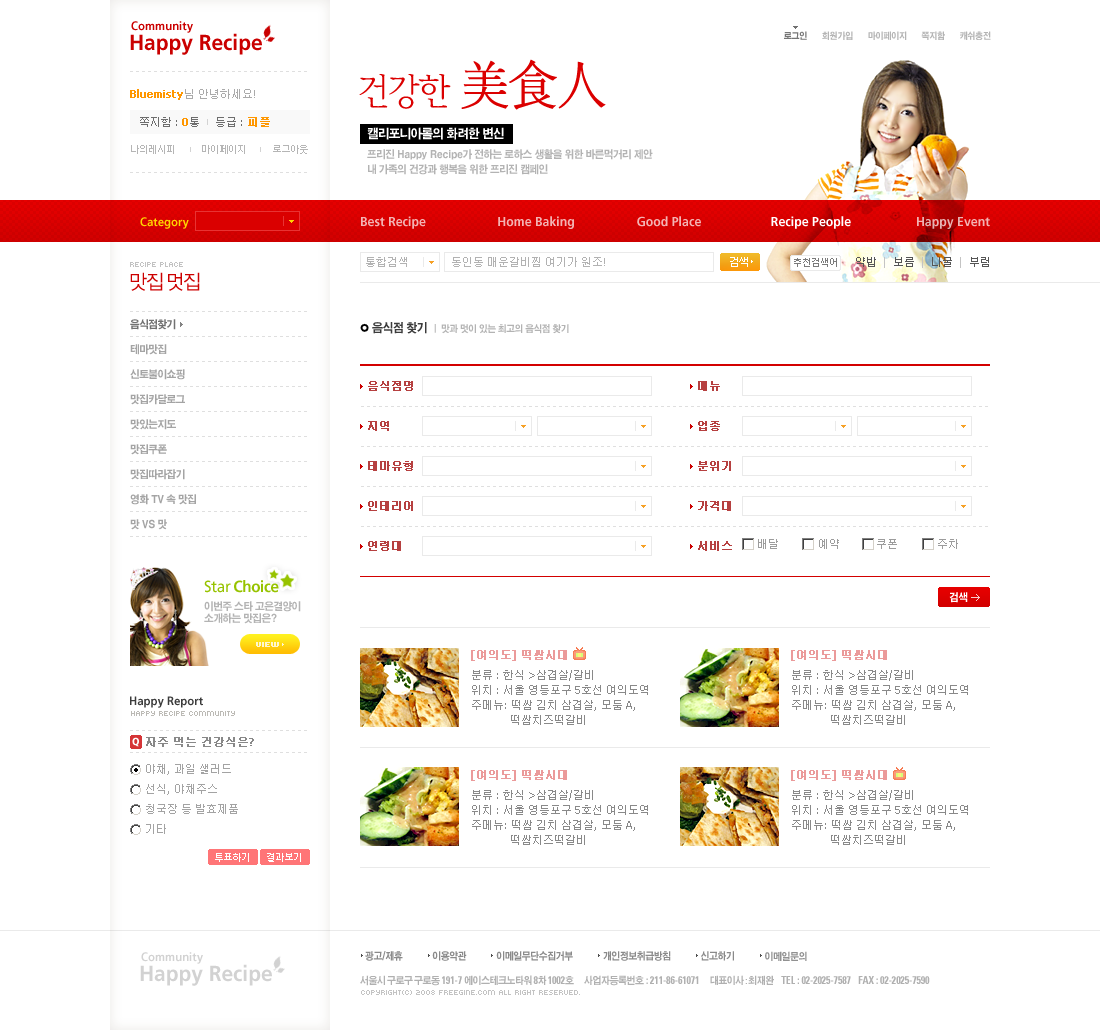
<style>
.page{position:relative;width:1100px;height:1030px;background:#ffffff}
.page>*{position:absolute;margin:0}
.t1{font:22px/20px "Frutiger-Bold";color:#ca0000;scale:0.95 1}
.t2{font:12px/20px "Frutiger-Bold";letter-spacing:-0.1em;color:#ca0000;scale:0.95 1}
.t3{font:12px/20px "Frutiger-Bold";color:#ca0000;scale:0.95 1}
.t4{font:9px "H2gtrE";letter-spacing:-0.03em;color:#b4b4b4;scale:0.9 1}
.t5{font:9px "H2gtrE";letter-spacing:-0.03em;color:#767676;scale:0.9 1}
.t6{font:36px "YDIYMjO220";letter-spacing:-0.05em;color:#db0000}
.t7{font:56px "YDIYMjO230";letter-spacing:-0.05em;color:#db0000;scale:0.95 1}
.t8{font:11px "Tahoma";color:#ff9700;font-weight:bold}
.t9{font:11px "Dotum";color:#aaaaaa}
.t10{font:11px "Tahoma";color:#aaaaaa}
.t11{font:11px "Dotum";color:#6d6d6d}
.t12{font:11px "Tahoma";color:#6d6d6d}
.t13{font:11px "Dotum";color:#ff9700;font-weight:bold}
.t14{font:10px "YDIWebDotum";color:#b5b5b5}
.t15{font:12px "Frutiger-Bold";color:#ffd200;scale:0.95 1}
.t16{font:13px "Frutiger-Bold";color:#f2b3b3;scale:0.95 1}
.t17{font:13px "Frutiger-Bold";color:#f4b3b3;scale:0.95 1}
.t18{font:13px "Frutiger-Bold";color:#ffffff;scale:0.95 1}
.t19{font:13px "Frutiger-Bold";color:#f0b3b3;scale:0.95 1}
.t20{font:11px "Dotum";color:#b2b2b2}
.t21{font:11px "Tahoma";color:#b2b2b2}
.t22{font:11px "YDIWebDotum";color:#ffffff}
.t23{font:11px "Dotum";color:#555555}
.t24{font:11px "Tahoma";color:#c4c4c4}
.t25{font:8px "Kroeger0555";color:#c2c2c2}
.t26{font:10px "YDIWebDotum";color:#7a7a7a}
.t27{font:20px "YDIWebDotum";letter-spacing:-0.05em;color:#cc0000;scale:0.95 1}
.t28{font:10.5px/25px "H2gtrE";letter-spacing:-0.05em;color:#a4a4a4;scale:0.92 1}
.t29{font:10.5px/25px "H2gtrE";letter-spacing:-0.05em;color:#717171;scale:0.92 1}
.t30{font:9.5px "H2gtrE";letter-spacing:-0.05em;color:#b3b3b3;scale:0.92 1}
.t31{font:12px "H2gtrE";letter-spacing:-0.05em;color:#3c3c3c;scale:0.92 1}
.t32{font:11px/40px "Dotum";color:#b64040;font-weight:bold}
.t33{font:11px "Dotum";color:#9c9c9c}
.t34{font:16px "Frutiger-Bold";letter-spacing:-0.02em;color:#97c300;scale:0.95 1}
.t35{font:16px "Frutiger-Roman";letter-spacing:-0.02em;color:#97c300;scale:0.95 1}
.t36{font:10.5px "H2gtrE";letter-spacing:-0.05em;color:#ffffff;scale:0.92 1}
.t37{font:10.5px/12px "H2gtrE";letter-spacing:-0.05em;color:#b3b3b3;scale:0.92 1}
.t38{font:8px "Kroeger0555";color:#fff7cf;font-weight:bold}
.t39{font:11px/15px "Dotum";color:#898989}
.t40{font:11px/20px "Tahoma";color:#eb9a9a;font-weight:bold}
.t41{font:11px/20px "Dotum";color:#eb9a9a;font-weight:bold}
.t42{font:11px/20px "Dotum";color:#898989}
.t43{font:11px/20px "Tahoma";color:#898989}
.t44{font:11px/15px "Tahoma";color:#898989}
.t45{font:12px "Frutiger-Bold";color:#3c3c3c;scale:0.95 1}
.t46{font:8px "Kroeger0555";color:#bcbab5}
.t47{font:10px "Frutiger-Black";color:#ffffff;scale:0.95 1}
.t48{font:11px "Dotum";color:#888888;font-weight:bold}
.t49{font:11px "Tahoma";color:#888888;font-weight:bold}
.t50{font:11px/20px "Dotum";color:#a3a3a3}
.t51{font:11px/20px "Tahoma";color:#a3a3a3}
.t52{font:10px "YDIWebDotum";color:#ffffff}
.t53{font:10px "H2gtrE";letter-spacing:-0.05em;color:#8a8a8a;scale:0.9 1}
.t54{font:10px "H2gtrE";letter-spacing:-0.05em;color:#919191;scale:0.9 1}
.t55{font:11px "Univeconbol";letter-spacing:-0.01em;color:#b0b0b0;scale:0.9 1}
.t56{font:10px "H2gtrE";letter-spacing:-0.05em;color:#b0b0b0;scale:0.9 1}
.t57{font:10px "Univeconbol";letter-spacing:-0.05em;color:#b0b0b0;scale:0.9 1}
.t58{font:8px "Kroeger0555";color:#c3c3c3}
</style>
<div class="page">
<p class="t1" style="left:130px;top:21px;width:132px;height:34px"><span class="t2"> </span><span class="t3">Community<br></span>Happy Recipe</p>
<p class="t4" style="left:784px;top:31px;width:207px;height:9px"><span class="t5">로그인</span>      회원가입      마이페이지      쪽지함      캐쉬충전</p>
<p class="t6" style="left:359px;top:59px;width:247px;height:51px">건강한 <span class="t7">美食人</span></p>
<p class="t8" style="left:130px;top:89px;width:125px;height:11px">Bluemisty<span class="t9">님 안녕하세요</span><span class="t10">!</span></p>
<p class="t11" style="left:140px;top:117px;width:130px;height:10px">쪽지함<span class="t12"> : </span><span class="t8">0</span>통     등급<span class="t12"> : </span><span class="t13">피플</span></p>
<p class="t14" style="left:131px;top:145px;width:177px;height:9px">나의레시피             마이페이지             로그아웃</p>
<p class="t15" style="left:140px;top:217px;width:49px;height:12px">Category</p>
<p class="t16" style="left:361px;top:216px;width:65px;height:13px">Best Recipe</p>
<p class="t17" style="left:498px;top:216px;width:76px;height:13px">Home Baking</p>
<p class="t17" style="left:637px;top:216px;width:64px;height:11px">Good Place</p>
<p class="t18" style="left:771px;top:216px;width:80px;height:13px">Recipe People</p>
<p class="t19" style="left:917px;top:217px;width:73px;height:12px">Happy Event</p>
<p class="t20" style="left:366px;top:257px;width:239px;height:10px">통합검색              동인동 매운갈비찜 여기가 원조<span class="t21">!</span></p>
<p class="t22" style="left:730px;top:257px;width:18px;height:10px">검색</p>
<p class="t23" style="left:856px;top:257px;width:133px;height:11px">약밥  <span class="t24">|  </span>보름  <span class="t24">|  </span>나물  <span class="t24">|  </span>부럼</p>
<p class="t25" style="left:130px;top:262px;width:53px;height:5px">Recipe place</p>
<p class="t26" style="left:794px;top:258px;width:43px;height:9px">추천검색어</p>
<p class="t27" style="left:130px;top:272px;width:70px;height:19px">맛집 멋집</p>
<p class="t28" style="left:130px;top:319px;width:66px;height:211px"><span class="t29">음식점찾기</span> <br>테마맛집 <br>신토불이쇼핑  <br>맛집카달로그  <br>맛있는지도 <br>맛집쿠폰 <br>맛집따라잡기 <br>영화 TV 속 맛집 <br>맛 VS 맛</p>
<p class="t30" style="left:372px;top:322px;width:197px;height:12px"><span class="t31">음식점 찾기  </span>|  맛과 멋이 있는 최고의 음식점 찾기</p>
<p class="t32" style="left:368px;top:381px;width:45px;height:170px">음식점명<br>지역<br>테마유형<br>인테리어<br>연령대</p>
<p class="t32" style="left:698px;top:381px;width:34px;height:170px">메뉴<br>업종<br>분위기<br>가격대<br>서비스</p>
<p class="t33" style="left:758px;top:539px;width:200px;height:10px">배달             예약            쿠폰             주차</p>
<p class="t34" style="left:204px;top:580px;width:75px;height:13px"><span class="t35">Star </span>Choice</p>
<p class="t36" style="left:949px;top:592px;width:19px;height:11px">검색</p>
<p class="t37" style="left:204px;top:601px;width:97px;height:23px">이번주 스타 고은결양이 <br>소개하는 맛집은?</p>
<p class="t38" style="left:256px;top:642px;width:23px;height:5px">view</p>
<p class="t39" style="left:471px;top:650px;width:177px;height:75px"><span class="t40">[</span><span class="t41">여의도</span><span class="t40">] </span><span class="t41">떡쌈시대<br></span><span class="t42">분류</span><span class="t43"> : </span><span class="t42">한식</span><span class="t43"> &gt;</span><span class="t42">삼겹살</span><span class="t43">/</span><span class="t42">갈비    <br></span>위치<span class="t44"> : </span>서울 영등포구<span class="t44"> 5</span>호선 여의도역   <br>주메뉴<span class="t44">: </span>떡쌈 김치 삼겹살<span class="t44">, </span>모둠<span class="t44"> A, <br>             </span>떡쌈치즈떡갈비</p>
<p class="t39" style="left:791px;top:650px;width:177px;height:75px"><span class="t40">[</span><span class="t41">여의도</span><span class="t40">] </span><span class="t41">떡쌈시대<br></span><span class="t42">분류</span><span class="t43"> : </span><span class="t42">한식</span><span class="t43"> &gt;</span><span class="t42">삼겹살</span><span class="t43">/</span><span class="t42">갈비    <br></span>위치<span class="t44"> : </span>서울 영등포구<span class="t44"> 5</span>호선 여의도역   <br>주메뉴<span class="t44">: </span>떡쌈 김치 삼겹살<span class="t44">, </span>모둠<span class="t44"> A, <br>             </span>떡쌈치즈떡갈비</p>
<p class="t45" style="left:130px;top:696px;width:73px;height:12px">Happy Report</p>
<p class="t46" style="left:131px;top:711px;width:104px;height:5px">Happy Recipe community</p>
<p class="t47" style="left:132px;top:737px;width:7px;height:10px">Q</p>
<p class="t48" style="left:146px;top:737px;width:108px;height:10px">자주 먹는 건강식은<span class="t49">?</span></p>
<p class="t50" style="left:146px;top:764px;width:92px;height:70px">야채<span class="t51">, </span>과일 샐러드<br>선식<span class="t51">, </span>야채주스<br>청국장 등 발효제품<br>기타</p>
<p class="t39" style="left:471px;top:770px;width:177px;height:75px"><span class="t40">[</span><span class="t41">여의도</span><span class="t40">] </span><span class="t41">떡쌈시대<br></span><span class="t42">분류</span><span class="t43"> : </span><span class="t42">한식</span><span class="t43"> &gt;</span><span class="t42">삼겹살</span><span class="t43">/</span><span class="t42">갈비    <br></span>위치<span class="t44"> : </span>서울 영등포구<span class="t44"> 5</span>호선 여의도역   <br>주메뉴<span class="t44">: </span>떡쌈 김치 삼겹살<span class="t44">, </span>모둠<span class="t44"> A, <br>             </span>떡쌈치즈떡갈비</p>
<p class="t39" style="left:791px;top:770px;width:177px;height:75px"><span class="t40">[</span><span class="t41">여의도</span><span class="t40">] </span><span class="t41">떡쌈시대<br></span><span class="t42">분류</span><span class="t43"> : </span><span class="t42">한식</span><span class="t43"> &gt;</span><span class="t42">삼겹살</span><span class="t43">/</span><span class="t42">갈비    <br></span>위치<span class="t44"> : </span>서울 영등포구<span class="t44"> 5</span>호선 여의도역   <br>주메뉴<span class="t44">: </span>떡쌈 김치 삼겹살<span class="t44">, </span>모둠<span class="t44"> A, <br>             </span>떡쌈치즈떡갈비</p>
<p class="t52" style="left:215px;top:853px;width:34px;height:9px">투표하기</p>
<p class="t52" style="left:267px;top:853px;width:34px;height:9px">결과보기</p>
<p class="t53" style="left:365px;top:951px;width:442px;height:10px">광고/제휴            이용약관            이메일무단수집거부            개인정보취급방침            신고하기            <span class="t54">이메일문의</span></p>
<p class="t55" style="left:360px;top:975px;width:570px;height:11px"><span class="t56">서울시 구로구 구로동</span> 191-7 <span class="t56">에이스테크노타워 </span>8<span class="t56">차 </span>1002<span class="t56">호       사업자등록번호 </span>: 211-86-61071       <span class="t56">대표이사</span><span class="t57"> : </span><span class="t56">최재완     </span>TEL : 02-2025-7587     FAX : 02-2025-7590</p>
<p class="t58" style="left:361px;top:990px;width:219px;height:5px">Copyright(C) 2008 Freegine.com All Right Reserved.</p>
</div>
